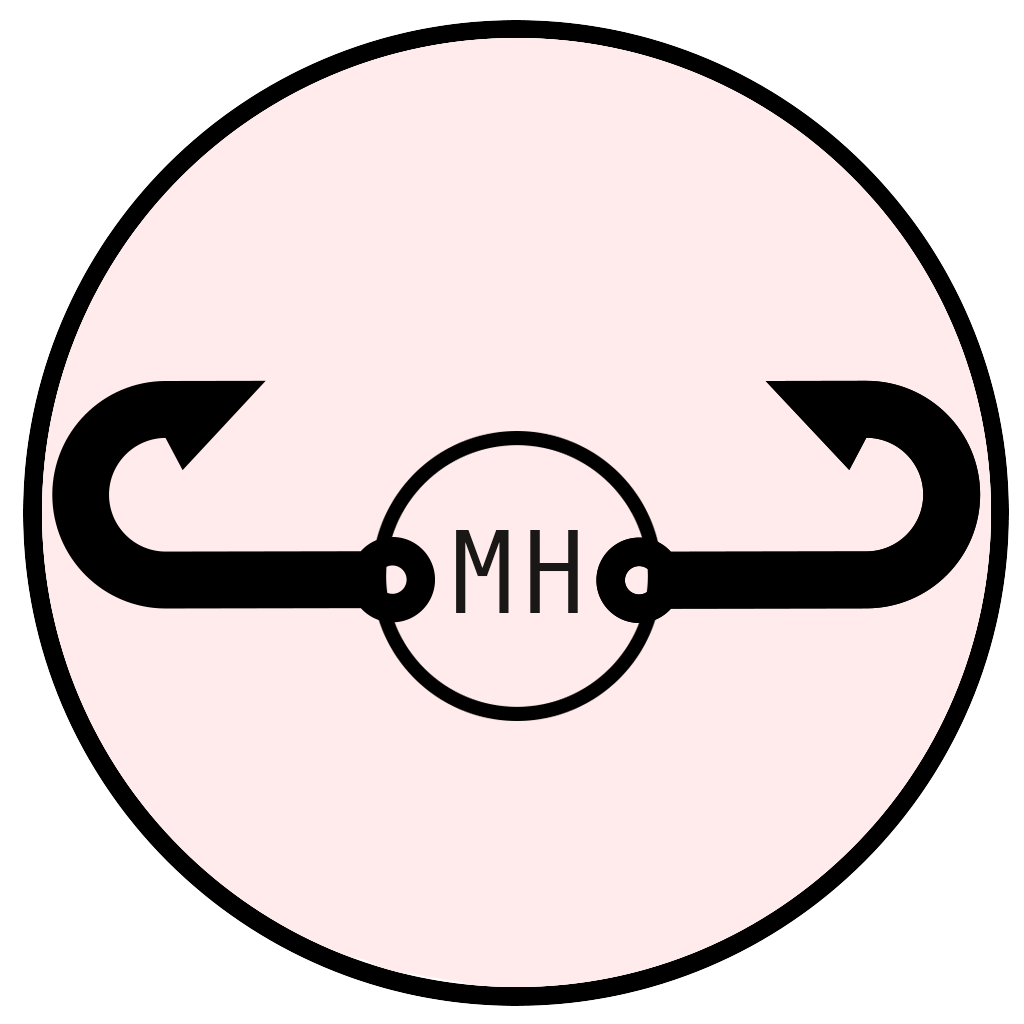
<style>
.page{position:relative;width:1024px;height:1024px;background:#ffebeb}
.page>*{position:absolute;margin:0}
.t1{font:120px "AndaleMono";color:#1a1717}
</style>
<div class="page">
<p class="t1" style="left:456px;top:530px;width:122px;height:83px">MH</p>
</div>
